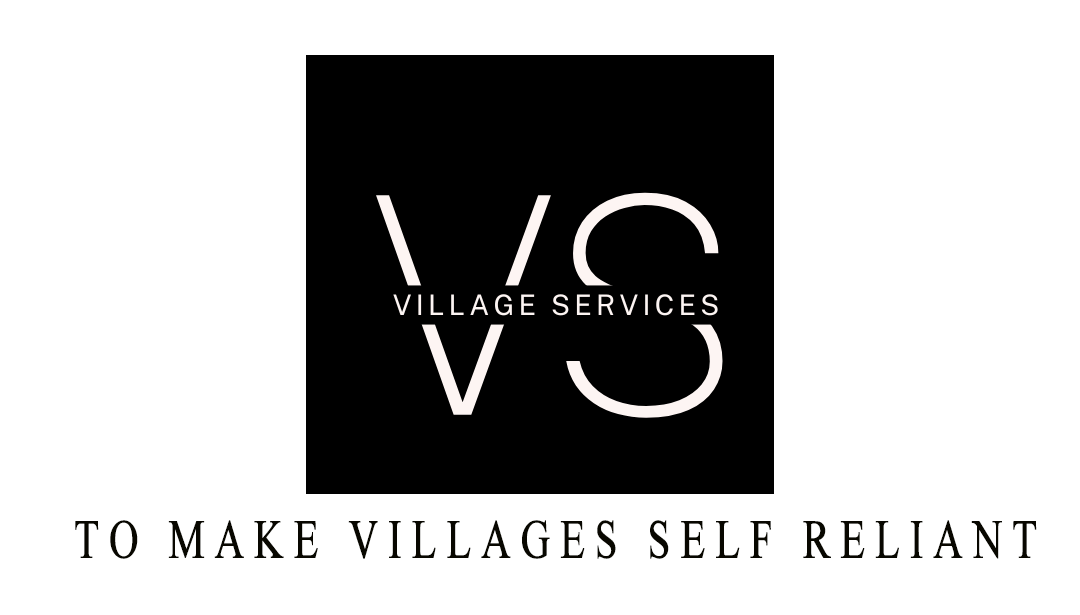
<style>
.page{position:relative;width:1080px;height:615px;background:#ffffff}
.page>*{position:absolute;margin:0}
.t1{font:54.5px "TimesNewRomanPSMT";letter-spacing:0.22em;color:#080700;font-weight:bold;scale:0.75 1}
</style>
<div class="page">
<p class="t1" style="left:75px;top:520px;width:962px;height:39px">TO MAKE VILLAGES SELF RELIANT</p>
</div>
